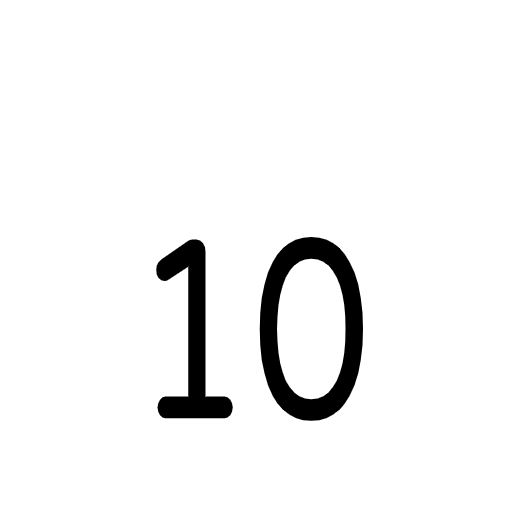
<style>
.page{position:relative;width:512px;height:512px;background:#ffffff}
.page>*{position:absolute;margin:0}
.t1{font:256px "VarelaRound-Regular";color:#000000;scale:0.74 1}
</style>
<div class="page">
<p class="t1" style="left:156px;top:237px;width:207px;height:184px">10</p>
</div>
